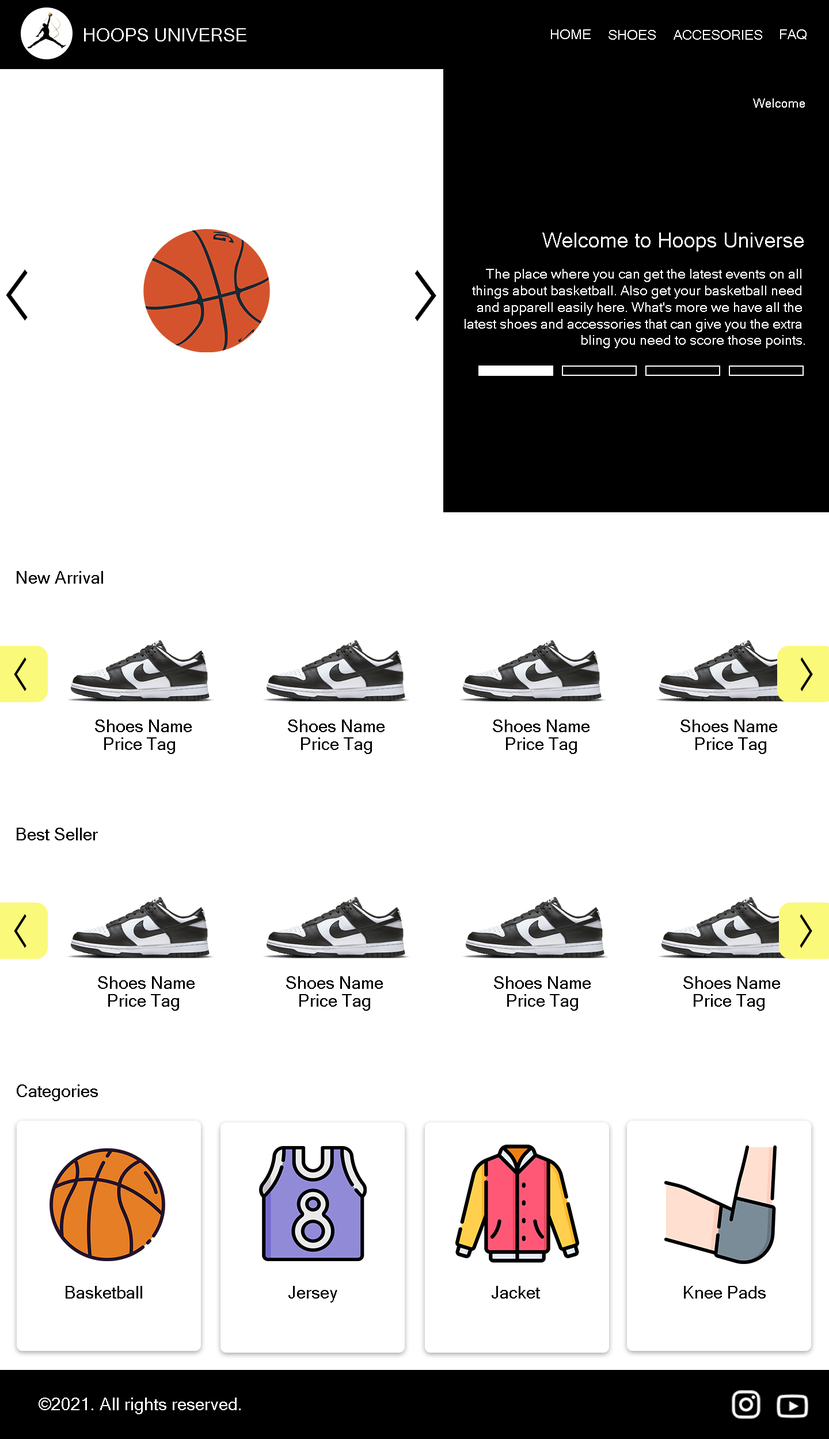
<style>
.page{position:relative;width:829px;height:1439px;background:#ffffff}
.page>*{position:absolute;margin:0}
.t1{font:18.4px "MicrosoftSansSerif";color:#ffffff}
.t2{font:13.8px "MicrosoftSansSerif";color:#ffffff}
.t3{font:12.7px "MicrosoftSansSerif";color:#ffffff}
.t4{font:20.7px "MicrosoftSansSerif";color:#ffffff}
.t5{font:17.3px "MicrosoftSansSerif";color:#000000}
.t6{font:17.3px "MicrosoftSansSerif";color:#ffffff}
</style>
<div class="page">
<p class="t1" style="left:84px;top:28px;width:162px;height:13px">HOOPS UNIVERSE</p>
<p class="t2" style="left:551px;top:29px;width:39px;height:10px">HOME</p>
<p class="t2" style="left:608px;top:30px;width:48px;height:10px">SHOES</p>
<p class="t2" style="left:673px;top:30px;width:89px;height:10px">ACCESORIES</p>
<p class="t2" style="left:780px;top:29px;width:26px;height:11px">FAQ</p>
<p class="t3" style="left:753px;top:98px;width:52px;height:10px">Welcome</p>
<p class="t4" style="left:542px;top:233px;width:261px;height:19px">Welcome to Hoops Universe</p>
<p class="t2" style="left:464px;top:269px;width:341px;height:79px;text-align:right">The place where you can get the latest events on all <br>things about basketball. Also get your basketball need <br>and apparell easily here. What's more we have all the <br>latest shoes and accessories that can give you the extra <br>bling you need to score those points.</p>
<p class="t5" style="left:17px;top:571px;width:86px;height:13px">New Arrival</p>
<p class="t5" style="left:95px;top:719px;width:97px;height:13px">Shoes Name</p>
<p class="t5" style="left:288px;top:719px;width:96px;height:13px">Shoes Name</p>
<p class="t5" style="left:493px;top:719px;width:96px;height:13px">Shoes Name</p>
<p class="t5" style="left:680px;top:719px;width:97px;height:13px">Shoes Name</p>
<p class="t5" style="left:104px;top:737px;width:71px;height:17px">Price Tag</p>
<p class="t5" style="left:301px;top:737px;width:71px;height:17px">Price Tag</p>
<p class="t5" style="left:506px;top:737px;width:71px;height:17px">Price Tag</p>
<p class="t5" style="left:695px;top:737px;width:71px;height:17px">Price Tag</p>
<p class="t5" style="left:17px;top:828px;width:81px;height:12px">Best Seller</p>
<p class="t5" style="left:98px;top:976px;width:97px;height:13px">Shoes Name</p>
<p class="t5" style="left:286px;top:976px;width:97px;height:13px">Shoes Name</p>
<p class="t5" style="left:494px;top:976px;width:96px;height:13px">Shoes Name</p>
<p class="t5" style="left:683px;top:976px;width:97px;height:13px">Shoes Name</p>
<p class="t5" style="left:108px;top:994px;width:71px;height:17px">Price Tag</p>
<p class="t5" style="left:299px;top:994px;width:71px;height:17px">Price Tag</p>
<p class="t5" style="left:507px;top:994px;width:71px;height:17px">Price Tag</p>
<p class="t5" style="left:694px;top:994px;width:70px;height:17px">Price Tag</p>
<p class="t5" style="left:17px;top:1084px;width:81px;height:17px">Categories</p>
<p class="t5" style="left:66px;top:1286px;width:76px;height:12px">Basketball</p>
<p class="t5" style="left:288px;top:1286px;width:49px;height:16px">Jersey</p>
<p class="t5" style="left:492px;top:1286px;width:48px;height:12px">Jacket</p>
<p class="t5" style="left:684px;top:1286px;width:81px;height:12px">Knee Pads</p>
<p class="t6" style="left:39px;top:1397px;width:202px;height:17px">©2021. All rights reserved.</p>
</div>
